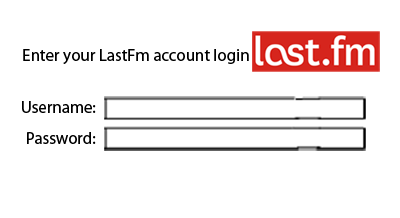
<style>
.page{position:relative;width:400px;height:218px;background:#ffffff}
.page>*{position:absolute;margin:0}
.t1{font:16.9px "MyriadPro-Regular";color:#000000}
</style>
<div class="page">
<p class="t1" style="left:23px;top:49px;width:226px;height:15px">Enter your LastFm account login</p>
<p class="t1" style="left:22px;top:101px;width:74px;height:12px">Username:</p>
<p class="t1" style="left:27px;top:132px;width:69px;height:12px">Password:</p>
</div>
